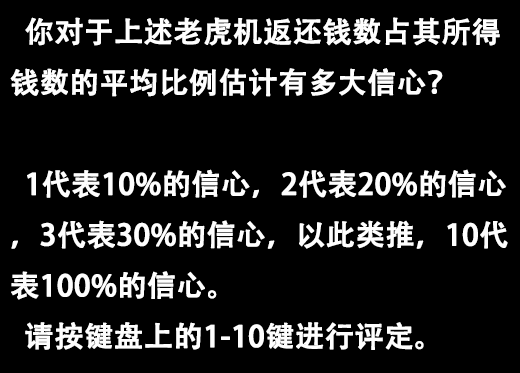
<style>
.page{position:relative;width:520px;height:373px;background:#000000}
.page>*{position:absolute;margin:0}
.t1{font:29px "AdobeHeitiStd-Regular";color:#fefefe;font-weight:bold}
</style>
<div class="page">
<p class="t1" style="left:10px;top:17px;width:498px;height:333px">你对于上述老虎机返还钱数占其所得钱数的平均比例估计有多大信心？<br><br>  1代表10%的信心，2代表20%的信心，3代表30%的信心，以此类推，10代表100%的信心。<br>  请按键盘上的1-10键进行评定。</p>
</div>
